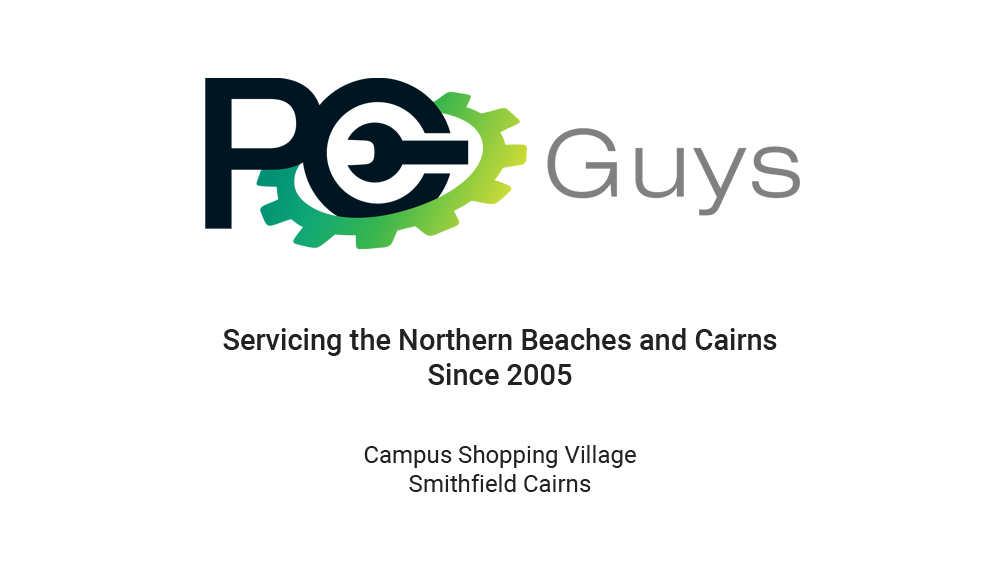
<style>
.page{position:relative;width:1000px;height:571px;background:#ffffff}
.page>*{position:absolute;margin:0}
.t1{font:29px "Roboto-Medium";color:#232122}
.t2{font:24px "Roboto-Regular";color:#232122}
</style>
<div class="page">
<p class="t1" style="left:223px;top:328px;width:554px;height:57px;text-align:center">Servicing the Northern Beaches and Cairns<br>Since 2005</p>
<p class="t2" style="left:364px;top:445px;width:272px;height:47px;text-align:center">Campus Shopping Village<br>Smithfield Cairns</p>
</div>
